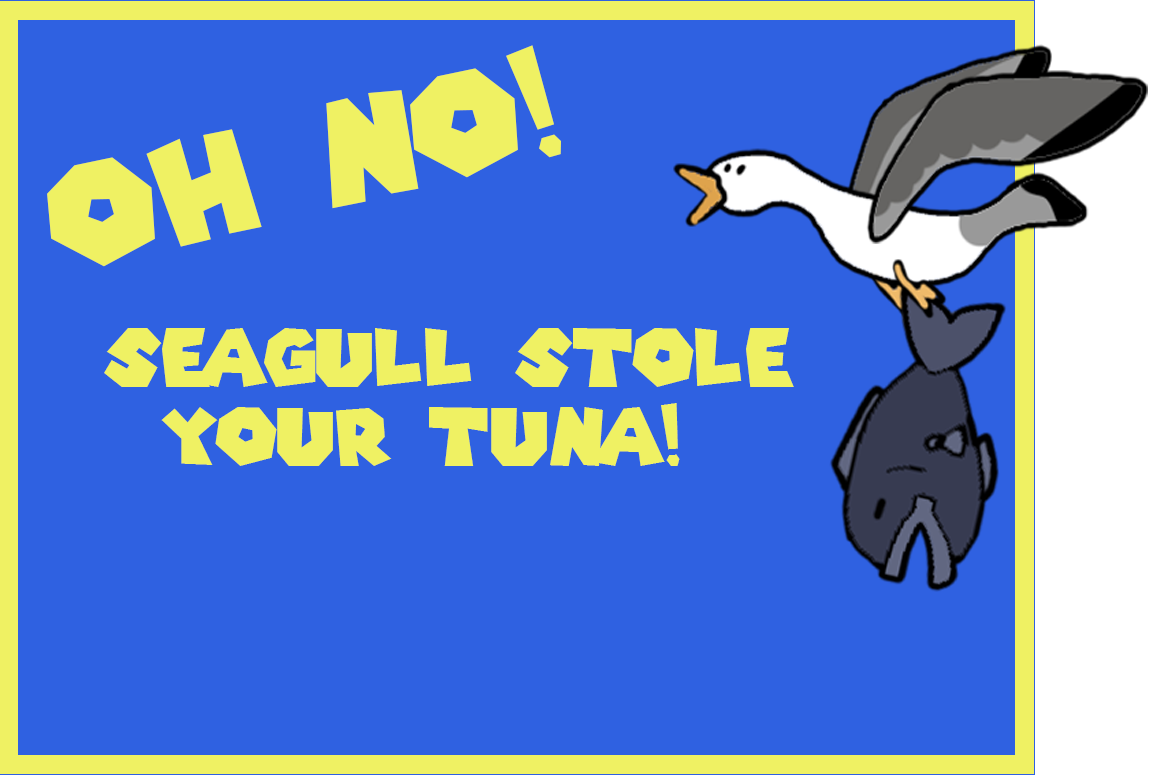
<style>
.page{position:relative;width:1149px;height:775px;background:#2f61e1}
.page>*{position:absolute;margin:0}
.t1{font:141.7px "SuperMarioGalaxy";color:#eff163}
.t2{font:79.2px/79.3px "SuperMarioGalaxy";color:#eff163}
</style>
<div class="page">
<p class="t1" style="left:47px;top:45px;width:514px;height:222px;rotate:-14deg">OH NO!</p>
<p class="t2" style="left:104px;top:328px;width:690px;height:138px;text-align:center">seagull stole<br>your tuna!</p>
</div>
